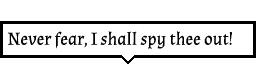
<style>
.page{position:relative;width:256px;height:64px;background:#ffffff}
.page>*{position:absolute;margin:0}
.t1{font:18px "Almendra-Regular";color:#000000}
</style>
<div class="page">
<p class="t1" style="left:7px;top:31px;width:225px;height:18px">Never fear, I shall spy thee out!</p>
</div>
